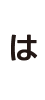
<style>
.page{position:relative;width:45px;height:100px;background:#ffffff}
.page>*{position:absolute;margin:0}
.t1{font:30px "ShinGoPro-Regular";letter-spacing:-0.1em;color:#231815;font-weight:bold}
</style>
<div class="page">
<p class="t1" style="left:11px;top:34px;width:27px;height:27px">は</p>
</div>
